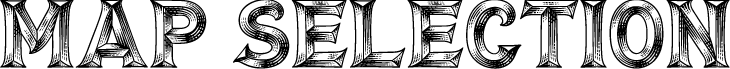
<style>
.page{position:relative;width:730px;height:69px;background:#ffffff}
.page>*{position:absolute;margin:0}
.t1{font:97px "BiteHard";color:#000000;scale:1.03 1}
</style>
<div class="page">
<p class="t1" style="left:0px;top:0px;width:730px;height:69px">Map Selection</p>
</div>
